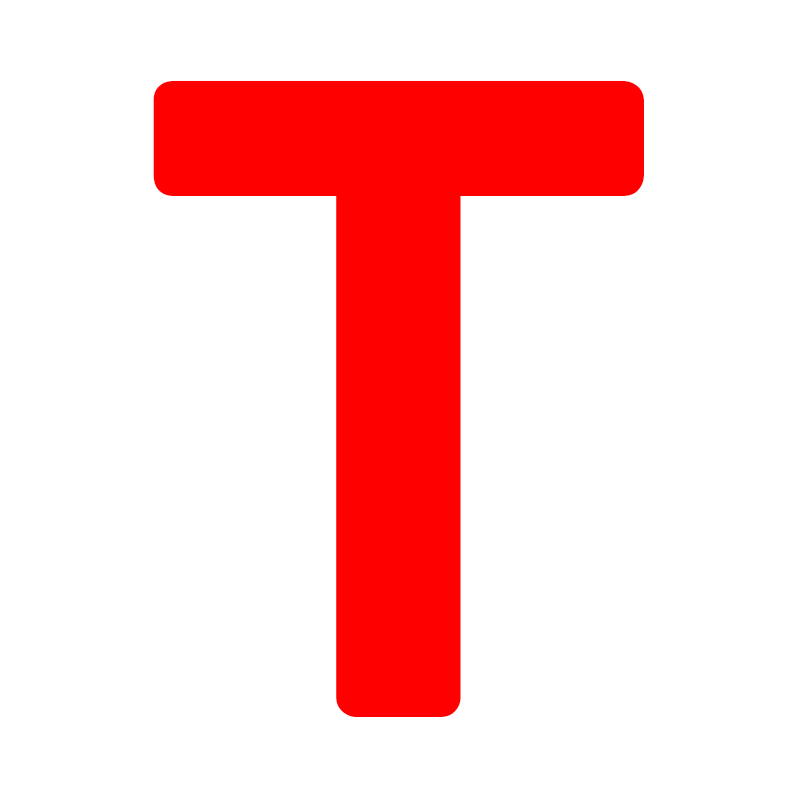
<style>
.page{position:relative;width:800px;height:800px;background:#ffffff}
.page>*{position:absolute;margin:0}
.t1{font:855.9px "COCOGOOSE-DemiBold";color:#ff0000}
</style>
<div class="page">
<p class="t1" style="left:153px;top:80px;width:491px;height:637px">T</p>
</div>
